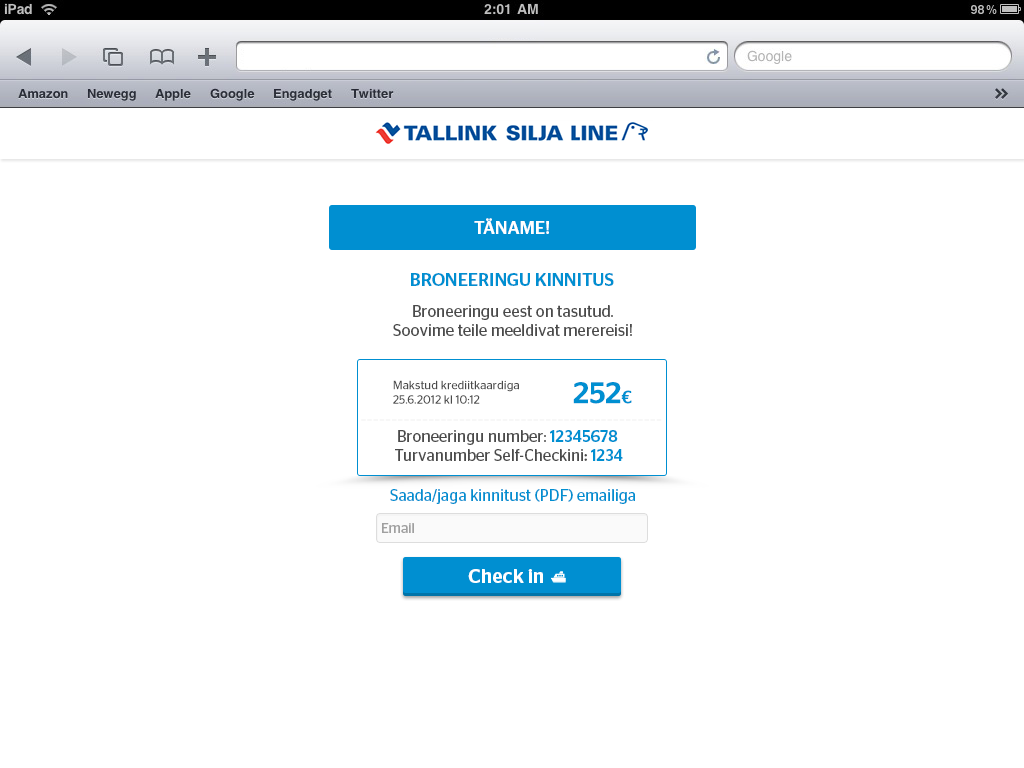
<style>
.page{position:relative;width:1024px;height:768px;background:#ffffff}
.page>*{position:absolute;margin:0}
.t1{font:18px "StagSans-Medium";color:#ffffff}
.t2{font:18px "StagSans-Medium";color:#008fd1}
.t3{font:16px "StagSans-Book";color:#4a4a4a}
.t4{font:12px "StagSans-Book";color:#4a4a4a}
.t5{font:30px "StagSans-Medium";color:#008fd1}
.t6{font:14px "StagSans-Light";letter-spacing:0.12em}
.t7{font:16px "StagSans-Medium";color:#008fd1}
.t8{font:16px "StagSans-Medium";color:#4a4a4a}
.t9{font:16px "StagSans-Book";color:#008fd1}
.t10{font:14px "StagSans-Book";color:#a0a0a0}
.t11{font:19.6px "StagSans-Medium";color:#feffff}
</style>
<div class="page">
<p class="t1" style="left:474px;top:218px;width:75px;height:16px">TÄNAME!</p>
<p class="t2" style="left:411px;top:273px;width:203px;height:13px">BRONEERINGU KINNITUS</p>
<p class="t3" style="left:393px;top:305px;width:239px;height:31px;text-align:center">Broneeringu eest on tasutud.<br>Soovime teile meeldivat merereisi!</p>
<p class="t4" style="left:393px;top:380px;width:126px;height:24px">Makstud krediitkaardiga<br>25.6.2012 kl 10:12</p>
<p class="t5" style="left:573px;top:382px;width:59px;height:22px">252<span class="t2">€</span></p>
<p class="t6" style="left:361px;top:419px;width:301px;height:2px">_________________________________________________</p>
<p class="t3" style="left:395px;top:430px;width:228px;height:31px;text-align:center">Broneeringu number: <span class="t7">12345678 <br></span>Turvanumber Self-Checkini<span class="t8">: </span><span class="t7">1234</span></p>
<p class="t9" style="left:390px;top:489px;width:245px;height:15px">Saada/jaga kinnitust (PDF) emailiga</p>
<p class="t10" style="left:382px;top:523px;width:32px;height:10px">Email</p>
<p class="t11" style="left:468px;top:569px;width:75px;height:14px">Check in</p>
</div>
